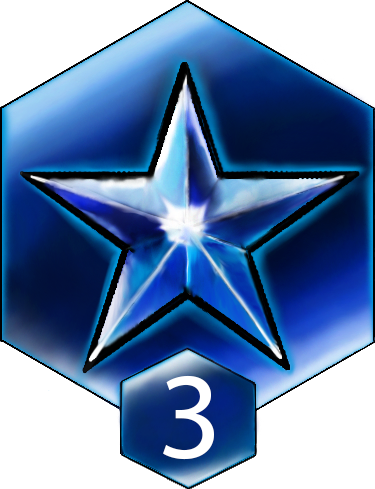
<style>
.page{position:relative;width:375px;height:489px;background:#ffffff}
.page>*{position:absolute;margin:0}
.t1{font:125px "MyriadPro-Regular";color:#ffffff}
</style>
<div class="page">
<p class="t1" style="left:163px;top:375px;width:51px;height:85px">3</p>
</div>
